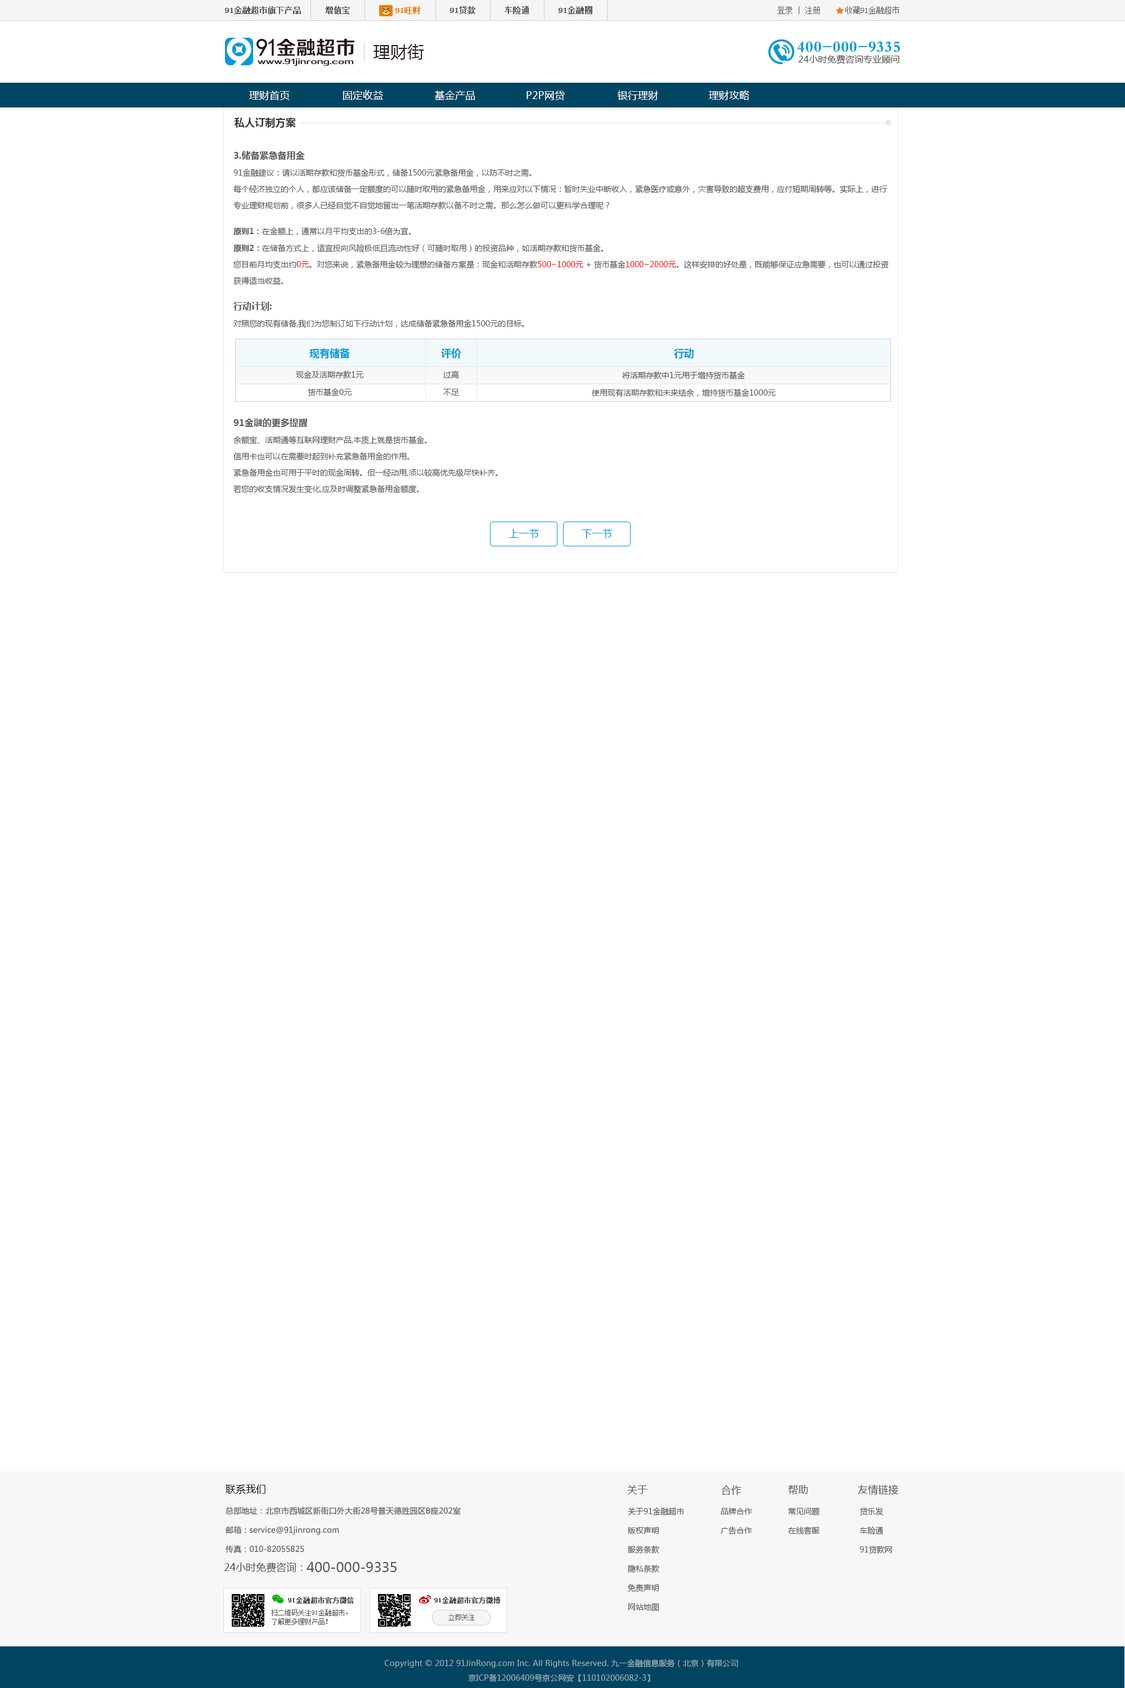
<style>
.page{position:relative;width:1125px;height:1688px;background:#ffffff}
.page>*{position:absolute;margin:0}
.t1{font:16.9px "MicrosoftYaHei";letter-spacing:0.01em;color:#231815}
.t2{font:10.1px "MicrosoftYaHei";letter-spacing:0.01em;color:#ffffff}
.t3{font:10.1px "MicrosoftYaHei-Bold";letter-spacing:0.01em;color:#333333}
.t4{font:9px "MicrosoftYaHei-Bold";color:#555555}
.t5{font:7.9px/13.5px "MicrosoftYaHei";color:#555555}
.t6{font:7.9px "MicrosoftYaHei";color:#555555}
.t7{font:7.9px "MicrosoftYaHei-Bold";color:#555555}
.t8{font:7.9px/13.5px "MicrosoftYaHei-Bold";color:#555555}
.t9{font:7.9px/13.5px "MicrosoftYaHei";color:#ff0000}
.t10{font:10.1px "MicrosoftYaHei-Bold";color:#0098d8}
.t11{font:10.1px "MicrosoftYaHei";letter-spacing:0.01em;color:#0098d9}
</style>
<div class="page">
<p class="t1" style="left:373px;top:44px;width:51px;height:16px">理财街</p>
<p class="t2" style="left:249px;top:91px;width:41px;height:9px">理财首页</p>
<p class="t2" style="left:343px;top:90px;width:40px;height:10px">固定收益</p>
<p class="t2" style="left:435px;top:90px;width:40px;height:10px">基金产品</p>
<p class="t2" style="left:526px;top:91px;width:39px;height:9px">P2P网贷</p>
<p class="t2" style="left:617px;top:91px;width:42px;height:9px">银行理财</p>
<p class="t2" style="left:709px;top:90px;width:40px;height:10px">理财攻略</p>
<p class="t3" style="left:235px;top:118px;width:61px;height:10px">私人订制方案</p>
<p class="t4" style="left:234px;top:151px;width:71px;height:9px">3.储备紧急备用金</p>
<p class="t5" style="left:233px;top:169px;width:654px;height:41px">91金融建议：请以活期存款和货币基金形式，储备1500元紧急备用金，以防不时之需。<br>每个经济独立的个人，都应该储备一定额度的可以随时取用的紧急备用金，用来应对以下情况：暂时失业中断收入，紧急医疗或意外，灾害导致的超支费用，应付短期周转等。实际上，进行<br>专业理财规划前，很多人已经自觉不自觉地留出一笔活期存款以备不时之需。那么怎么做可以更科学合理呢？</p>
<p class="t6" style="left:233px;top:227px;width:178px;height:9px"><span class="t7">原则1：</span>在金额上，通常以月平均支出的3-6倍为宜。</p>
<p class="t5" style="left:233px;top:244px;width:656px;height:41px"><span class="t8">原则2：</span>在储备方式上，适宜投向风险极低且流动性好（可随时取用）的投资品种，如活期存款和货币基金。<br>您目前月均支出约<span class="t9">0元</span>。对您来说，紧急备用金较为理想的储备方案是：现金和活期存款<span class="t9">500~1000元 </span>+ 货币基金<span class="t9">1000~2000元</span>。这样安排的好处是，既能够保证应急需要，也可以通过投资<br>获得适当收益。</p>
<p class="t4" style="left:233px;top:302px;width:39px;height:8px">行动计划:</p>
<p class="t6" style="left:233px;top:320px;width:291px;height:8px">对照您的现有储备,我们为您制订如下行动计划，达成储备紧急备用金1500元的目标。</p>
<p class="t10" style="left:309px;top:348px;width:41px;height:10px">现有储备</p>
<p class="t10" style="left:441px;top:348px;width:20px;height:10px">评价</p>
<p class="t10" style="left:674px;top:348px;width:20px;height:10px">行动</p>
<p class="t6" style="left:296px;top:371px;width:67px;height:8px">现金及活期存款1元</p>
<p class="t6" style="left:443px;top:371px;width:16px;height:8px">过高</p>
<p class="t6" style="left:622px;top:371px;width:123px;height:9px">将活期存款中1元用于增持货币基金</p>
<p class="t6" style="left:308px;top:388px;width:44px;height:9px">货币基金0元</p>
<p class="t6" style="left:443px;top:389px;width:16px;height:6px">不足</p>
<p class="t6" style="left:592px;top:389px;width:184px;height:8px">使用现有活期存款和未来结余，增持货币基金1000元</p>
<p class="t4" style="left:233px;top:418px;width:75px;height:10px">91金融的更多提醒</p>
<p class="t5" style="left:233px;top:436px;width:265px;height:57px">余额宝、活期通等互联网理财产品,本质上就是货币基金。<br>信用卡也可以在需要时起到补充紧急备用金的作用。<br>紧急备用金也可用于平时的现金周转。但一经动用,须以较高优先级尽快补齐。<br>若您的收支情况发生变化,应及时调整紧急备用金额度。</p>
<p class="t11" style="left:508px;top:529px;width:31px;height:9px">上一节</p>
<p class="t11" style="left:582px;top:529px;width:31px;height:9px">下一节</p>
</div>
